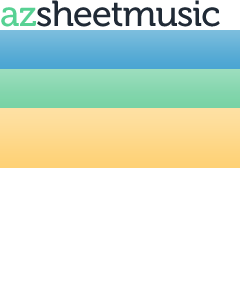
<style>
.page{position:relative;width:240px;height:300px;background:#ffffff}
.page>*{position:absolute;margin:0}
.t1{font:36px "Museo500-Regular";letter-spacing:-0.025em;color:#202a36}
.t2{font:36px "Museo500-Regular";letter-spacing:-0.025em;color:#57d193}
</style>
<div class="page">
<p class="t1" style="left:1px;top:0px;width:219px;height:27px"><span class="t2">az</span>sheetmusic</p>
</div>
